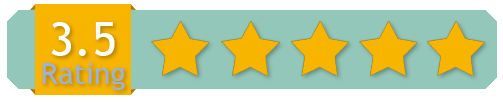
<style>
.page{position:relative;width:503px;height:103px;background:#93c7ba}
.page>*{position:absolute;margin:0}
.t1{font:48px "TrebuchetMS";color:#ffffff}
.t2{font:30px "TrebuchetMS";color:#9bb1de}
</style>
<div class="page">
<p class="t1" style="left:51px;top:22px;width:64px;height:34px">3.5</p>
<p class="t2" style="left:42px;top:63px;width:83px;height:27px">Rating</p>
</div>
